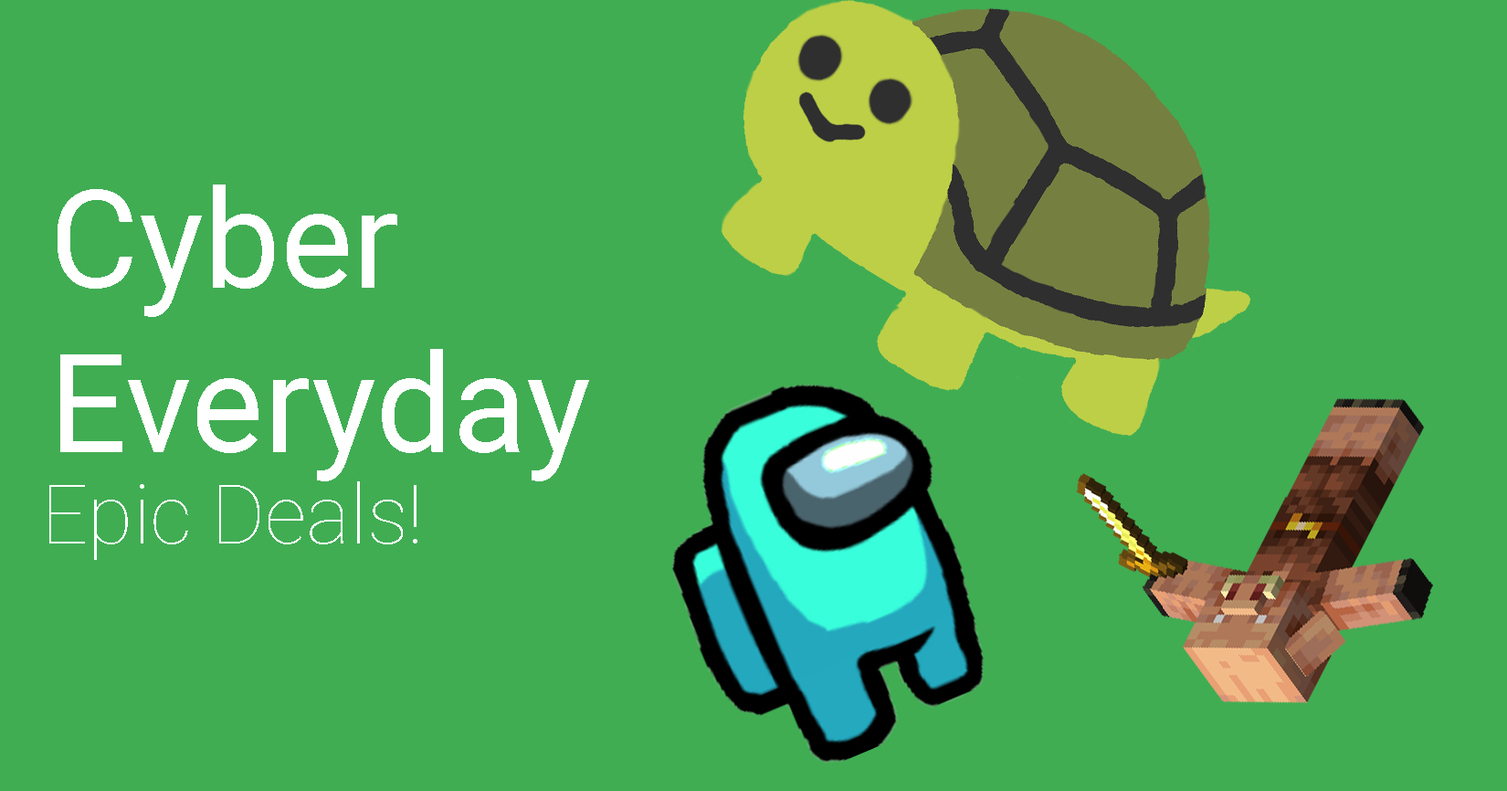
<style>
.page{position:relative;width:1507px;height:791px;background:#40ad53}
.page>*{position:absolute;margin:0}
.t1{font:137px "Roboto-Regular";color:#ffffff}
.t2{font:82.2px "Roboto-Thin";color:#ffffff}
</style>
<div class="page">
<p class="t1" style="left:58px;top:185px;width:531px;height:296px">Cyber<br>Everyday</p>
<p class="t2" style="left:49px;top:481px;width:368px;height:79px">Epic Deals!</p>
</div>
